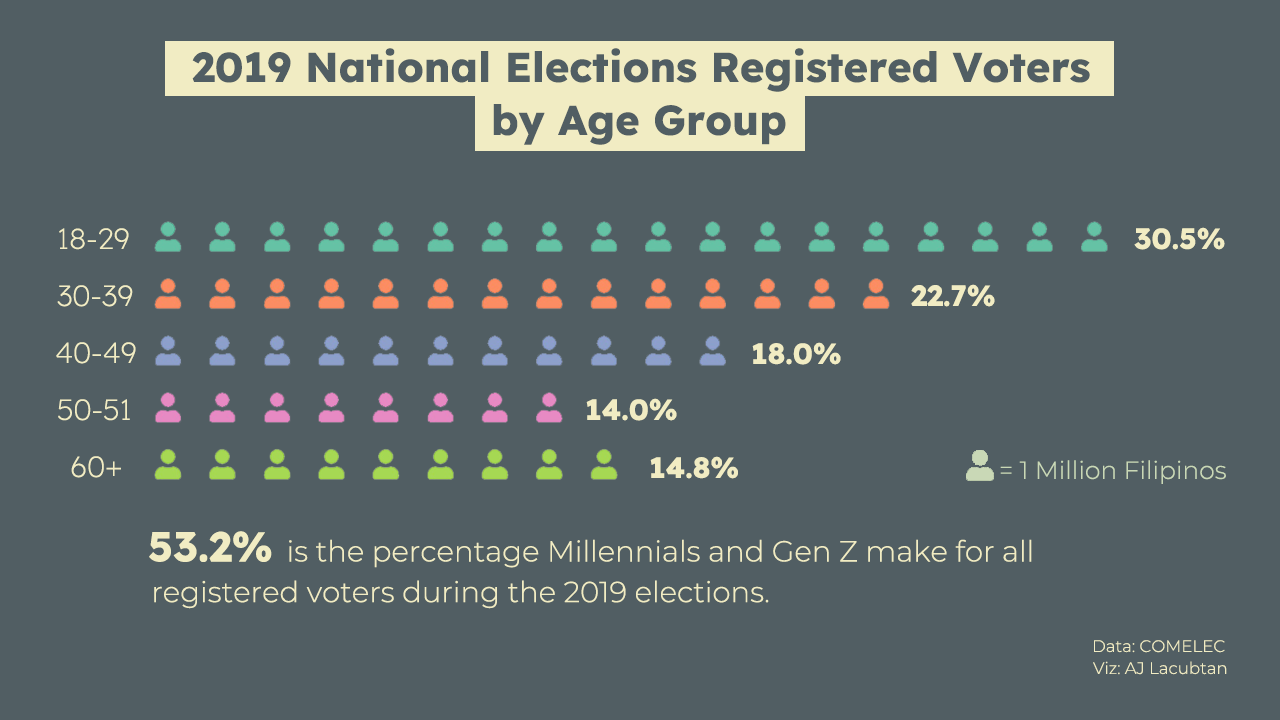
<style>
.page{position:relative;width:1280px;height:720px;background:#515e63}
.page>*{position:absolute;margin:0}
.t1{font:41.7px "Lexend-Bold";color:#515e63}
.t2{font:29.2px "Lexend-Light";color:#f1ecc3}
.t3{font:29.2px "Lexend-Bold";color:#f1ecc3}
.t4{font:25px "Montserrat-Light";color:#c9d8b6}
.t5{font:29.2px "Montserrat-Light";color:#f1ecc3}
.t6{font:41.7px "Lexend-Bold";color:#f1ecc3}
.t7{font:16.7px "Montserrat-Light";color:#f1ecc3}
</style>
<div class="page">
<p class="t1" style="left:192px;top:48px;width:898px;height:44px">2019 National Elections Registered Voters</p>
<p class="t1" style="left:493px;top:104px;width:293px;height:41px">by Age Group</p>
<p class="t2" style="left:59px;top:228px;width:70px;height:22px">18-29</p>
<p class="t3" style="left:1134px;top:227px;width:91px;height:23px">30.5%</p>
<p class="t2" style="left:57px;top:285px;width:76px;height:22px">30-39</p>
<p class="t3" style="left:911px;top:284px;width:84px;height:23px">22.7%</p>
<p class="t2" style="left:56px;top:342px;width:80px;height:22px">40-49</p>
<p class="t3" style="left:752px;top:342px;width:89px;height:23px">18.0%</p>
<p class="t2" style="left:58px;top:399px;width:72px;height:22px">50-51</p>
<p class="t3" style="left:586px;top:398px;width:91px;height:23px">14.0%</p>
<p class="t2" style="left:71px;top:456px;width:50px;height:22px">60+</p>
<p class="t3" style="left:650px;top:456px;width:88px;height:23px">14.8%</p>
<p class="t4" style="left:1000px;top:460px;width:226px;height:24px">= 1 Million Filipinos</p>
<p class="t5" style="left:149px;top:531px;width:883px;height:37px"><span class="t6">53.2% </span>is the percentage Millennials and Gen Z make for all</p>
<p class="t5" style="left:154px;top:580px;width:615px;height:29px">registered voters during the 2019 elections.</p>
<p class="t7" style="left:1094px;top:640px;width:131px;height:13px">Data: COMELEC</p>
<p class="t7" style="left:1093px;top:661px;width:134px;height:14px">Viz: AJ Lacubtan</p>
</div>
